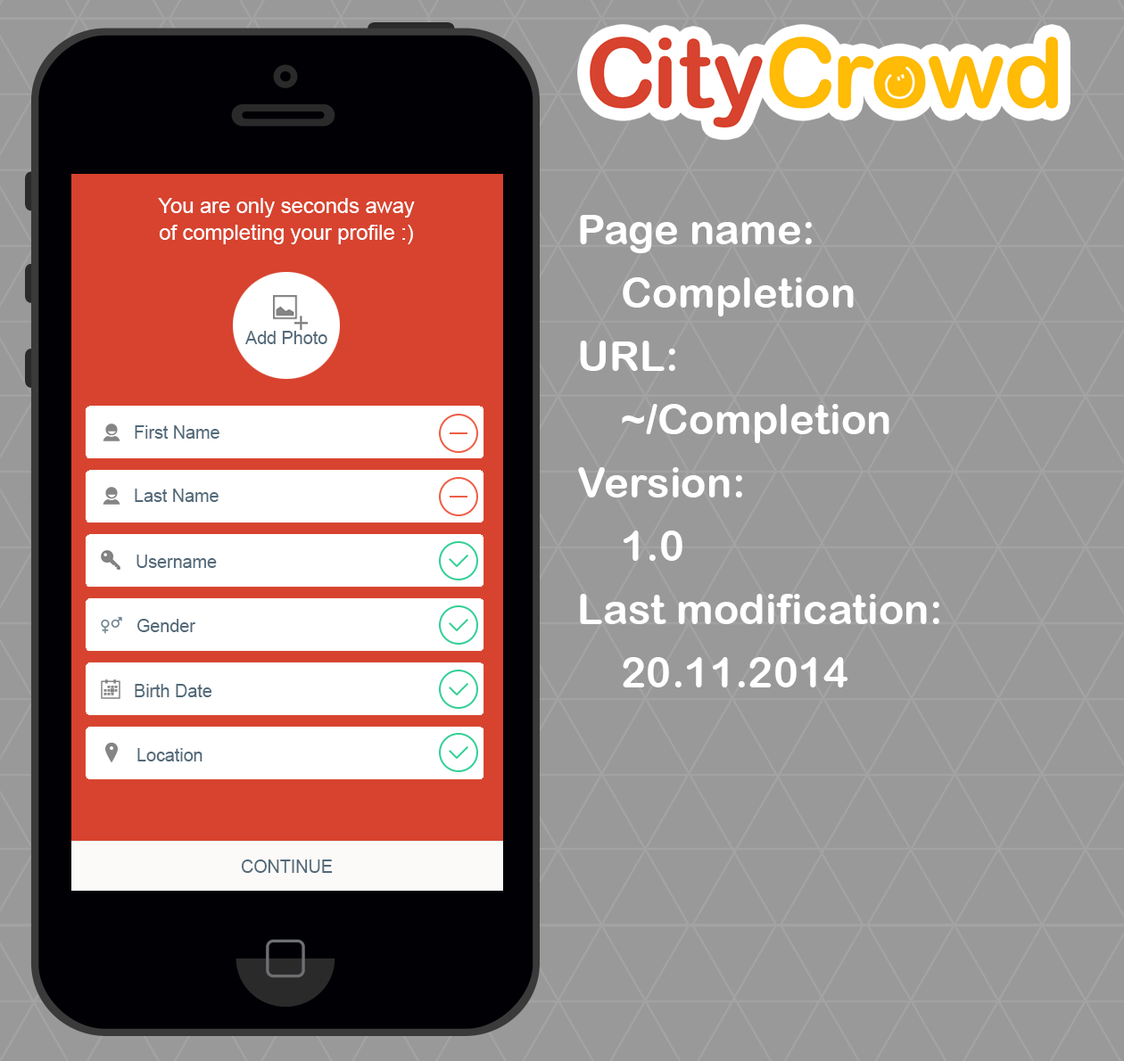
<style>
.page{position:relative;width:1124px;height:1061px;background:#999999}
.page>*{position:absolute;margin:0}
.t1{font:21.1px/26.4px "ArialMT";color:#ffffff}
.t2{font:42.2px/63.3px "ArialRoundedMTBold";color:#ffffff}
.t3{font:17.6px "ArialMT";color:#536a7a}
</style>
<div class="page">
<p class="t1" style="left:158px;top:198px;width:257px;height:46px;text-align:center">You are only seconds away<br>of completing your profile :)</p>
<p class="t2" style="left:578px;top:215px;width:361px;height:473px">Page name:<br>Completion<br>URL:<br>~/Completion<br>Version:<br>1.0<br>Last modification:<br>20.11.2014</p>
<p class="t3" style="left:245px;top:331px;width:82px;height:13px">Add Photo</p>
<p class="t3" style="left:135px;top:425px;width:84px;height:14px">First Name</p>
<p class="t3" style="left:135px;top:489px;width:83px;height:13px">Last Name</p>
<p class="t3" style="left:136px;top:555px;width:81px;height:13px">Username</p>
<p class="t3" style="left:137px;top:619px;width:58px;height:13px">Gender</p>
<p class="t3" style="left:135px;top:684px;width:77px;height:13px">Birth Date</p>
<p class="t3" style="left:137px;top:748px;width:65px;height:14px">Location</p>
<p class="t3" style="left:241px;top:860px;width:92px;height:13px">CONTINUE</p>
</div>
